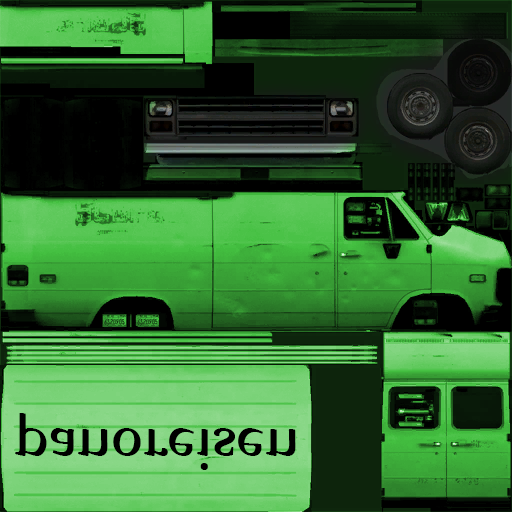
<style>
.page{position:relative;width:512px;height:512px}
.page>*{position:absolute;margin:0}
.t1{font:72px "Nyala-Regular";color:#000000}
</style>
<div class="page">
<p class="t1" style="left:15px;top:413px;width:281px;height:57px">panoreisen</p>
</div>
